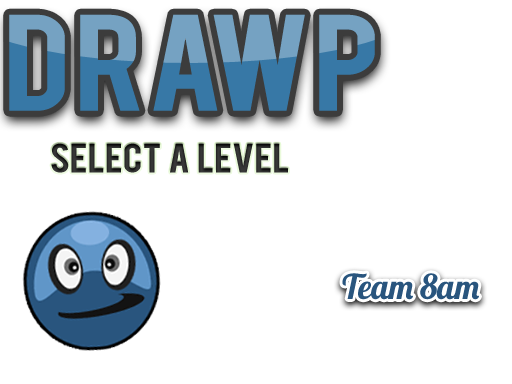
<style>
.page{position:relative;width:512px;height:384px;background:#ffffff}
.page>*{position:absolute;margin:0}
.t1{font:32.1px "Bebas";color:#383838;scale:1.17 1}
.t2{font:34.2px "Lobster";color:#29557e}
</style>
<div class="page">
<p class="t1" style="left:51px;top:143px;width:237px;height:30px">Select  A  Level</p>
<p class="t2" style="left:342px;top:273px;width:137px;height:27px">Team 8am</p>
</div>
